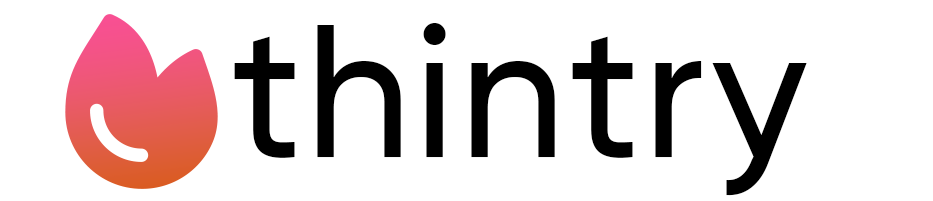
<style>
.page{position:relative;width:933px;height:201px;background:#ffffff}
.page>*{position:absolute;margin:0}
.t1{font:187.5px "Gilroy-Medium";letter-spacing:0.02em;color:#000000}
</style>
<div class="page">
<p class="t1" style="left:234px;top:23px;width:573px;height:173px">thintry</p>
</div>
